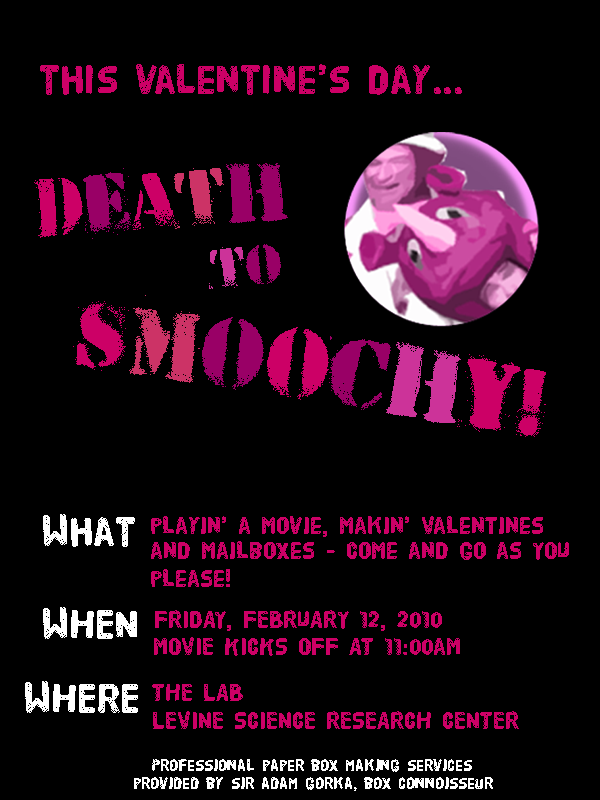
<style>
.page{position:relative;width:600px;height:800px;background:#000000}
.page>*{position:absolute;margin:0}
.t1{font:41.7px "HVDPoster";color:#cc0066}
.t2{font:75px "HVDPeace";color:#cc0066}
.t3{font:75px "HVDPeace";color:#990066}
.t4{font:75px "HVDPeace";color:#cc3366}
.t5{font:51.9px "HVDPeace";color:#cc3399}
.t6{font:51.9px "HVDPeace";color:#990066}
.t7{font:91.7px "HVDPeace";color:#cc0066}
.t8{font:58.3px "HVDPeace";color:#cc0066}
.t9{font:91.7px "HVDPeace";color:#cc3366}
.t10{font:91.7px "HVDPeace";color:#990066}
.t11{font:91.7px "HVDPeace";color:#cc3399}
.t12{font:41.7px "HVDPoster";color:#ffffff}
.t13{font:25px "HVDPoster";color:#cc0066}
.t14{font:16.7px "HVDPoster";color:#ffffff}
</style>
<div class="page">
<p class="t1" style="left:40px;top:64px;width:422px;height:31px">this valentine’s day...</p>
<p class="t2" style="left:34px;top:163px;width:254px;height:76px;rotate:-4deg">D<span class="t3">E</span>A<span class="t4">T</span><span class="t3">H</span></p>
<p class="t5" style="left:209px;top:244px;width:72px;height:45px;rotate:-3deg">T<span class="t6">O</span></p>
<p class="t7" style="left:73px;top:295px;width:473px;height:142px;rotate:9deg"><span class="t8"><br></span>S<span class="t9">M</span><span class="t10">O</span>O<span class="t10">C</span><span class="t11">H</span>Y!</p>
<p class="t12" style="left:43px;top:514px;width:92px;height:33px">What</p>
<p class="t13" style="left:151px;top:516px;width:392px;height:21px">playin’ a movie, makin’ Valentines</p>
<p class="t13" style="left:151px;top:541px;width:418px;height:19px">and mailboxes - come and go as YOU</p>
<p class="t13" style="left:151px;top:569px;width:79px;height:18px">please!</p>
<p class="t12" style="left:43px;top:607px;width:94px;height:32px">WHEN</p>
<p class="t13" style="left:155px;top:610px;width:287px;height:21px">FRIDAY, FEBRUARY 12, 2010</p>
<p class="t13" style="left:154px;top:637px;width:306px;height:19px">MOVIE KICKS OFF AT 11:00aM</p>
<p class="t12" style="left:25px;top:681px;width:113px;height:32px">WHERE</p>
<p class="t13" style="left:152px;top:684px;width:91px;height:17px">THE LAB</p>
<p class="t13" style="left:153px;top:711px;width:366px;height:18px">LEVINE SCIENCE RESEARCH CENTER</p>
<p class="t14" style="left:152px;top:759px;width:320px;height:13px">Professional paper box making services</p>
<p class="t14" style="left:134px;top:777px;width:359px;height:14px">provided by sir adam gorka, box connoisseur</p>
</div>
